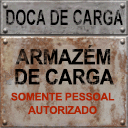
<style>
.page{position:relative;width:128px;height:128px}
.page>*{position:absolute;margin:0}
.t1{font:21.3px "Arial-BoldMT";color:#000000;text-transform:uppercase;scale:0.65 1}
.t2{font:21.3px/20px "Arial-BoldMT";letter-spacing:-0.02em;color:#000000;text-transform:uppercase;scale:0.9 1}
.t3{font:10.7px/13.3px "Arial-BoldMT";letter-spacing:-0.02em;color:#ae2201;text-transform:uppercase}
</style>
<div class="page">
<p class="t1" style="left:6px;top:9px;width:117px;height:17px">doca de carga</p>
<p class="t2" style="left:15px;top:45px;width:99px;height:40px;text-align:center">Armazém<br>de carga</p>
<p class="t3" style="left:11px;top:92px;width:104px;height:22px;text-align:center">SOMENTE PESSOAL<br>AUTORIZADO</p>
</div>
